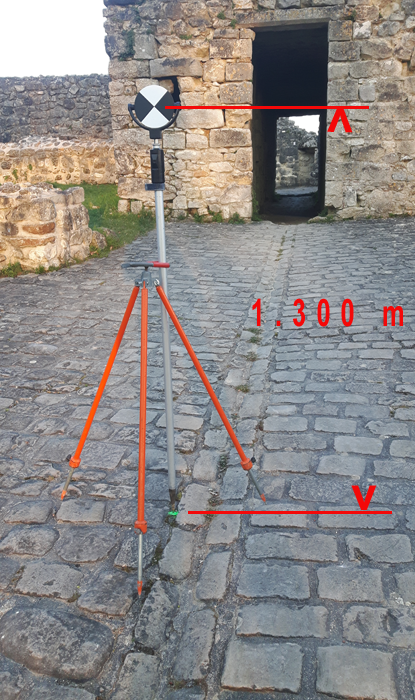
<style>
.page{position:relative;width:415px;height:700px}
.page>*{position:absolute;margin:0}
.t1{font:37.8px "Arial-BoldMT";letter-spacing:0.4em;color:#f40808;scale:0.67 1}
</style>
<div class="page">
<p class="t1" style="left:252px;top:298px;width:151px;height:29px">1.300 m</p>
</div>
